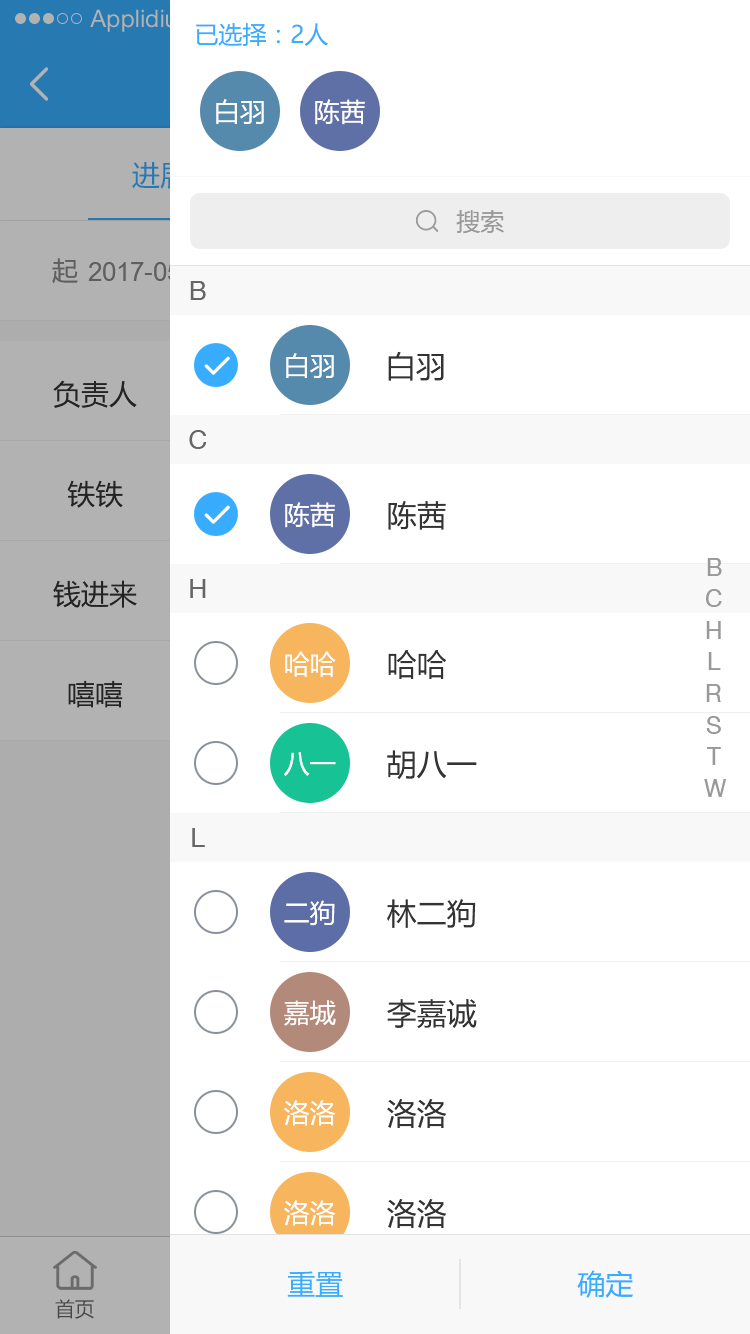
<style>
.page{position:relative;width:750px;height:1334px;background:#ffffff}
.page>*{position:absolute;margin:0}
.t1{font:24px "HelveticaNeueLTStd-Roman";color:#b2b2b2}
.t2{font:24px "MicrosoftYaHei";color:#38adff}
.t3{font:26px "MicrosoftYaHei";color:#fffefe}
.t4{font:24px "MicrosoftYaHei";color:#999999}
.t5{font:26px "MicrosoftYaHei";color:#5f5f5f}
.t6{font:26px "ArialMT"}
.t7{font:26px "HelveticaNeueLTPro-Roman";color:#666666}
.t8{font:30px "MicrosoftYaHei";color:#333333}
.t9{font:28px "MicrosoftYaHei";color:#333333}
.t10{font:24px "HelveticaNeueLTPro-Roman";color:#999999}
.t11{font:28px "MicrosoftYaHei";color:#38adff}
.t12{font:20px "MicrosoftYaHei";color:#474747;text-transform:uppercase}
</style>
<div class="page">
<p class="t1" style="left:90px;top:9px;width:107px;height:23px">Applidium</p>
<p class="t2" style="left:196px;top:23px;width:132px;height:23px">已选择：2人</p>
<p class="t3" style="left:216px;top:99px;width:48px;height:25px">白羽</p>
<p class="t3" style="left:315px;top:99px;width:50px;height:26px">陈茜</p>
<p class="t4" style="left:456px;top:210px;width:48px;height:24px">搜索</p>
<p class="t5" style="left:52px;top:258px;width:26px;height:26px">起</p>
<p class="t6" style="left:88px;top:262px;width:130px;height:19px">2017-05-15</p>
<p class="t7" style="left:190px;top:281px;width:16px;height:19px">B</p>
<p class="t3" style="left:286px;top:353px;width:48px;height:25px">白羽</p>
<p class="t8" style="left:388px;top:351px;width:56px;height:30px">白羽</p>
<p class="t9" style="left:53px;top:380px;width:84px;height:28px">负责人</p>
<p class="t7" style="left:189px;top:430px;width:18px;height:19px">C</p>
<p class="t9" style="left:67px;top:480px;width:56px;height:28px">铁铁</p>
<p class="t3" style="left:285px;top:502px;width:50px;height:26px">陈茜</p>
<p class="t8" style="left:388px;top:501px;width:58px;height:29px">陈茜</p>
<p class="t10" style="left:707px;top:558px;width:15px;height:18px">B</p>
<p class="t9" style="left:53px;top:580px;width:84px;height:28px">钱进来</p>
<p class="t7" style="left:190px;top:579px;width:16px;height:19px">H</p>
<p class="t10" style="left:706px;top:589px;width:16px;height:18px">C</p>
<p class="t10" style="left:706px;top:621px;width:15px;height:18px">H</p>
<p class="t3" style="left:285px;top:651px;width:51px;height:26px">哈哈</p>
<p class="t8" style="left:388px;top:650px;width:58px;height:29px">哈哈</p>
<p class="t10" style="left:708px;top:652px;width:13px;height:18px">L</p>
<p class="t9" style="left:68px;top:680px;width:55px;height:28px">嘻嘻</p>
<p class="t10" style="left:706px;top:684px;width:15px;height:18px">R</p>
<p class="t10" style="left:706px;top:716px;width:15px;height:18px">S</p>
<p class="t8" style="left:387px;top:750px;width:90px;height:30px">胡八一</p>
<p class="t10" style="left:707px;top:747px;width:14px;height:18px">T</p>
<p class="t3" style="left:284px;top:752px;width:52px;height:24px">八一</p>
<p class="t10" style="left:704px;top:779px;width:22px;height:18px">W</p>
<p class="t7" style="left:192px;top:828px;width:13px;height:19px">L</p>
<p class="t3" style="left:284px;top:900px;width:51px;height:26px">二狗</p>
<p class="t8" style="left:387px;top:899px;width:89px;height:29px">林二狗</p>
<p class="t3" style="left:284px;top:1000px;width:52px;height:26px">嘉城</p>
<p class="t8" style="left:387px;top:999px;width:90px;height:30px">李嘉诚</p>
<p class="t3" style="left:284px;top:1100px;width:52px;height:26px">洛洛</p>
<p class="t8" style="left:387px;top:1099px;width:60px;height:29px">洛洛</p>
<p class="t3" style="left:284px;top:1200px;width:52px;height:26px">洛洛</p>
<p class="t8" style="left:387px;top:1199px;width:60px;height:29px">洛洛</p>
<p class="t11" style="left:287px;top:1271px;width:56px;height:26px">重置</p>
<p class="t11" style="left:577px;top:1270px;width:56px;height:28px">确定</p>
<p class="t12" style="left:55px;top:1299px;width:39px;height:20px">首页</p>
</div>
